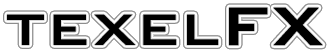
<style>
.page{position:relative;width:330px;height:53px;background:#ffffff}
.page>*{position:absolute;margin:0}
.t1{font:72px "BankGothicBT-Medium";color:#000000}
.t2{font:72px "BankGothicBT-Medium";color:#000000;font-weight:bold}
</style>
<div class="page">
<p class="t1" style="left:7px;top:7px;width:316px;height:39px">texel<span class="t2">FX</span></p>
</div>
